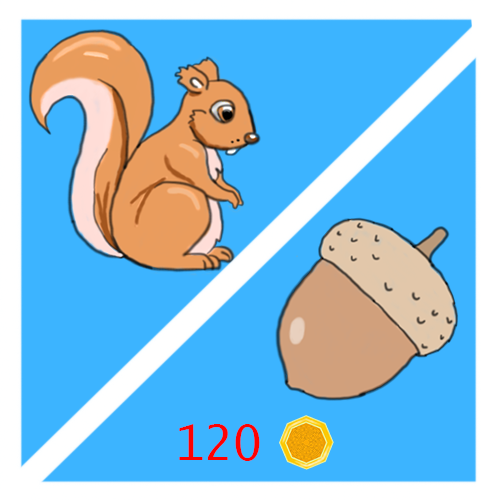
<style>
.page{position:relative;width:500px;height:500px;background:#3cb4ff}
.page>*{position:absolute;margin:0}
.t1{font:48px "LucidaConsole";color:#ff0101}
</style>
<div class="page">
<p class="t1" style="left:179px;top:424px;width:81px;height:37px">120</p>
</div>
